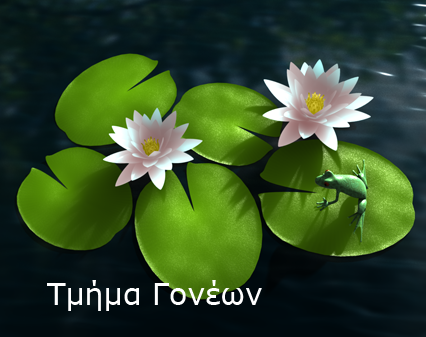
<style>
.page{position:relative;width:426px;height:337px}
.page>*{position:absolute;margin:0}
.t1{font:30px "Verdana";color:#ffffff}
</style>
<div class="page">
<p class="t1" style="left:47px;top:280px;width:215px;height:31px">Τμήμα Γονέων</p>
</div>
